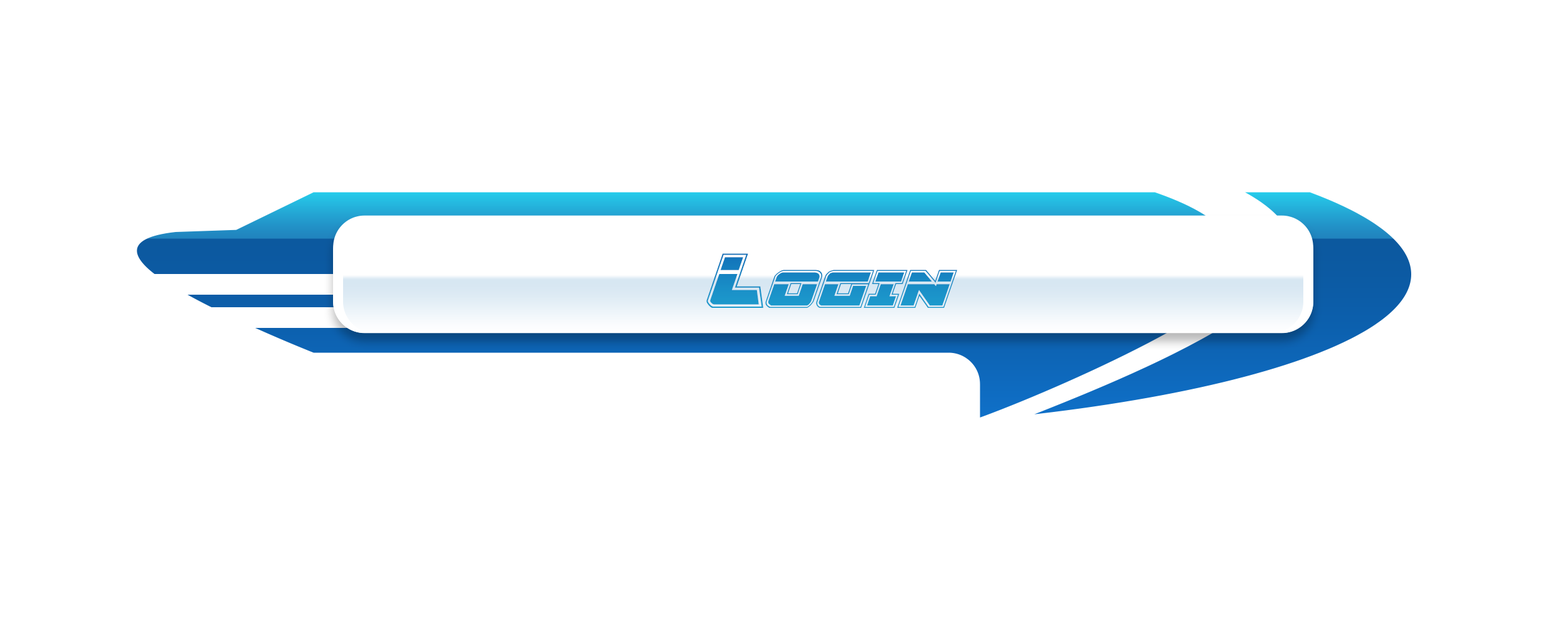
<style>
.page{position:relative;width:1568px;height:627px;background:#ffffff}
.page>*{position:absolute;margin:0}
.t1{font:94.1px "AircruiserAcademyLaserItalic";letter-spacing:0.01em;color:#1a90c8;font-variant:small-caps}
.t2{font:15.7px "MyriadPro-Regular";letter-spacing:0.01em;color:#1a90c8;font-variant:small-caps}
</style>
<div class="page">
<p class="t1" style="left:706px;top:253px;width:251px;height:55px"><span class="t2"><br></span>Login</p>
</div>
